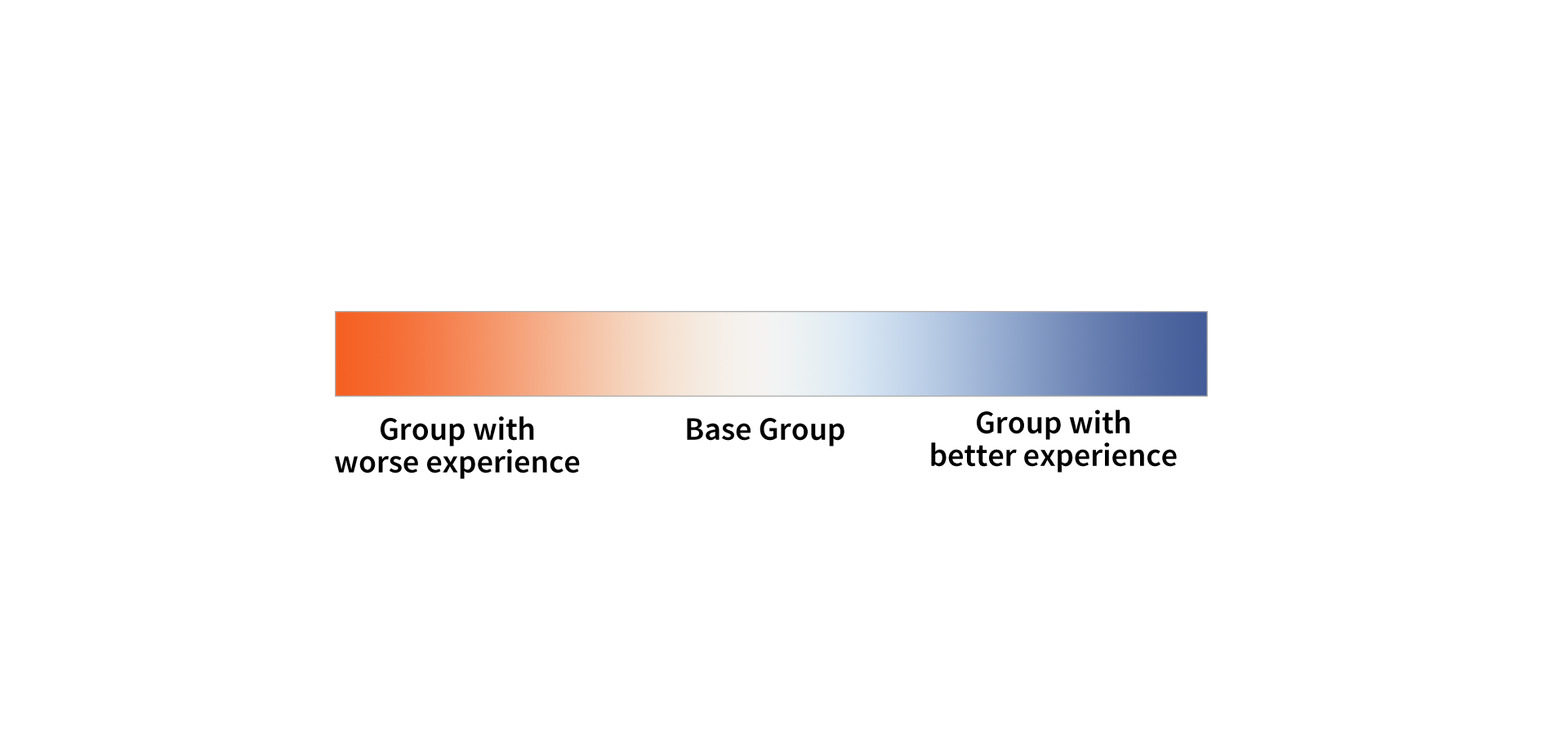
<style>
.page{position:relative;width:1568px;height:755px;background:#ffffff}
.page>*{position:absolute;margin:0}
.t1{font:32.7px/32.7px "SourceSansPro-Semibold";color:#000000}
.t2{font:32.7px "SourceSansPro-Semibold";color:#000000}
</style>
<div class="page">
<p class="t1" style="left:931px;top:410px;width:246px;height:63px;text-align:center">Group with <br>better experience</p>
<p class="t1" style="left:335px;top:416px;width:245px;height:63px;text-align:center">Group with <br>worse experience</p>
<p class="t2" style="left:687px;top:418px;width:157px;height:29px">Base Group</p>
</div>
